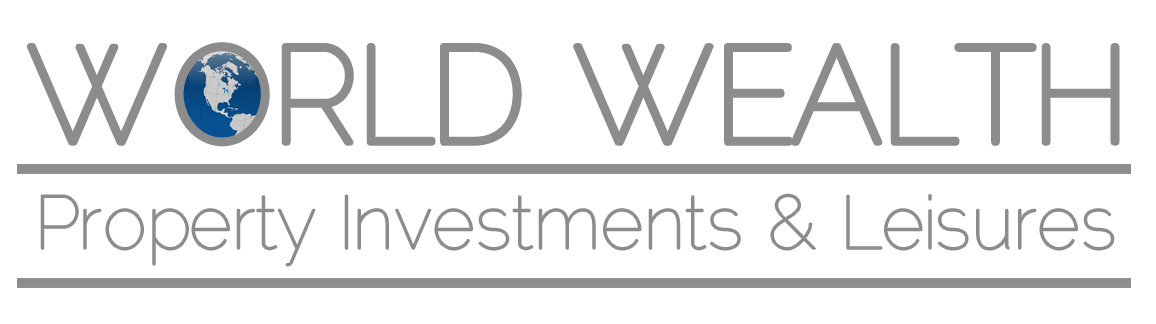
<style>
.page{position:relative;width:1156px;height:324px;background:#ffffff}
.page>*{position:absolute;margin:0}
.t1{font:135.9px "Raleway-Thin";letter-spacing:0.005em;color:#8c8c8c}
.t2{font:75px "Raleway-Thin";letter-spacing:0.005em;color:#8c8c8c}
</style>
<div class="page">
<p class="t1" style="left:29px;top:45px;width:1088px;height:99px">WORLD WEALTH</p>
<p class="t2" style="left:41px;top:194px;width:1073px;height:72px">Property Investments &amp; Leisures</p>
</div>
